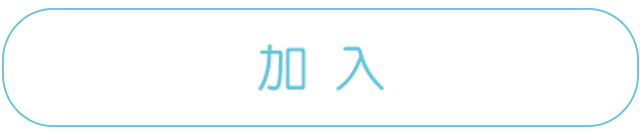
<style>
.page{position:relative;width:640px;height:135px;background:#ffffff}
.page>*{position:absolute;margin:0}
.t1{font:51px "DFYuan-Md-HK-BF";letter-spacing:0.5em;color:#64c4d9}
</style>
<div class="page">
<p class="t1" style="left:258px;top:44px;width:126px;height:47px">加入</p>
</div>
